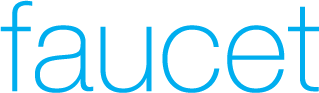
<style>
.page{position:relative;width:319px;height:93px;background:#ffffff}
.page>*{position:absolute;margin:0}
.t1{font:125px "HelveticaNeue-Thin";color:#00aeef}
</style>
<div class="page">
<p class="t1" style="left:0px;top:0px;width:319px;height:93px">faucet</p>
</div>
